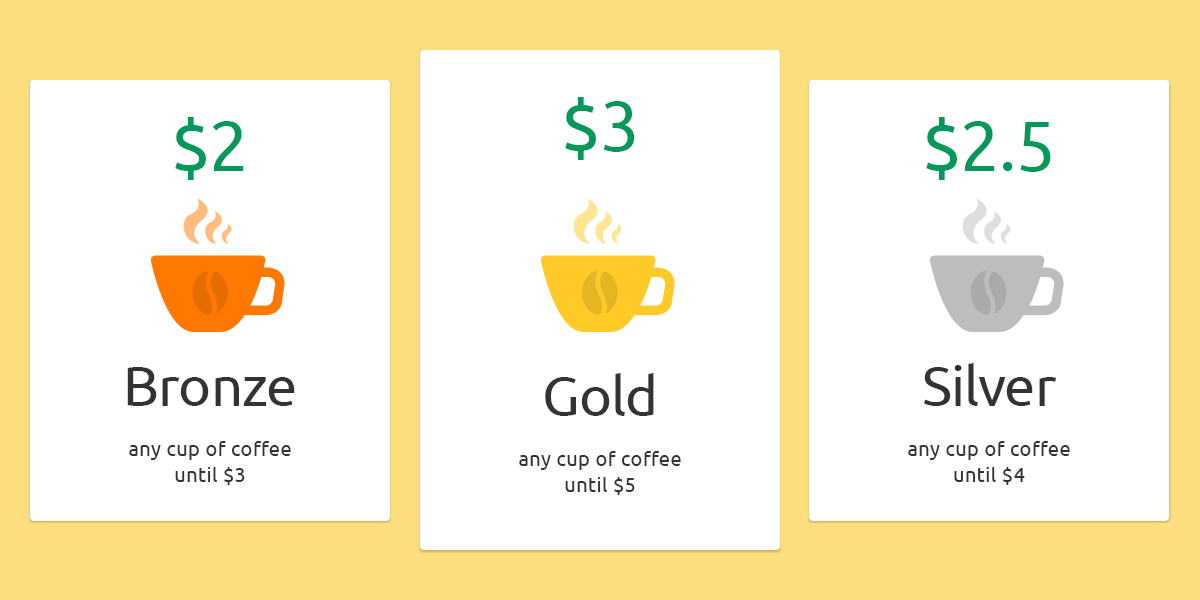
<style>
.page{position:relative;width:1200px;height:600px;background:#ffffff}
.page>*{position:absolute;margin:0}
.t1{font:70px "Ubuntu-Regular";letter-spacing:0.025em;color:#02995b}
.t2{font:70px "Ubuntu-Regular";color:#02995b}
.t3{font:20px/26px "Ubuntu-Regular";letter-spacing:0.025em;color:#333333}
.t4{font:56px/24px "Ubuntu-Regular";color:#333333}
</style>
<div class="page">
<p class="t1" style="left:565px;top:97px;width:70px;height:63px">$<span class="t2">3</span></p>
<p class="t1" style="left:175px;top:117px;width:69px;height:63px">$2</p>
<p class="t2" style="left:926px;top:117px;width:125px;height:63px"><span class="t1">$</span>2.5</p>
<p class="t3" style="left:908px;top:363px;width:162px;height:122px;text-align:center"><span class="t4">Silver<br><br></span>any cup of coffee<br>until $4</p>
<p class="t3" style="left:127px;top:367px;width:168px;height:118px;text-align:center"><span class="t4">Bronze<br><br></span>any cup of coffee<br>until $3</p>
<p class="t3" style="left:519px;top:373px;width:162px;height:122px;text-align:center"><span class="t4">Gold<br><br></span>any cup of coffee<br>until $5</p>
</div>
